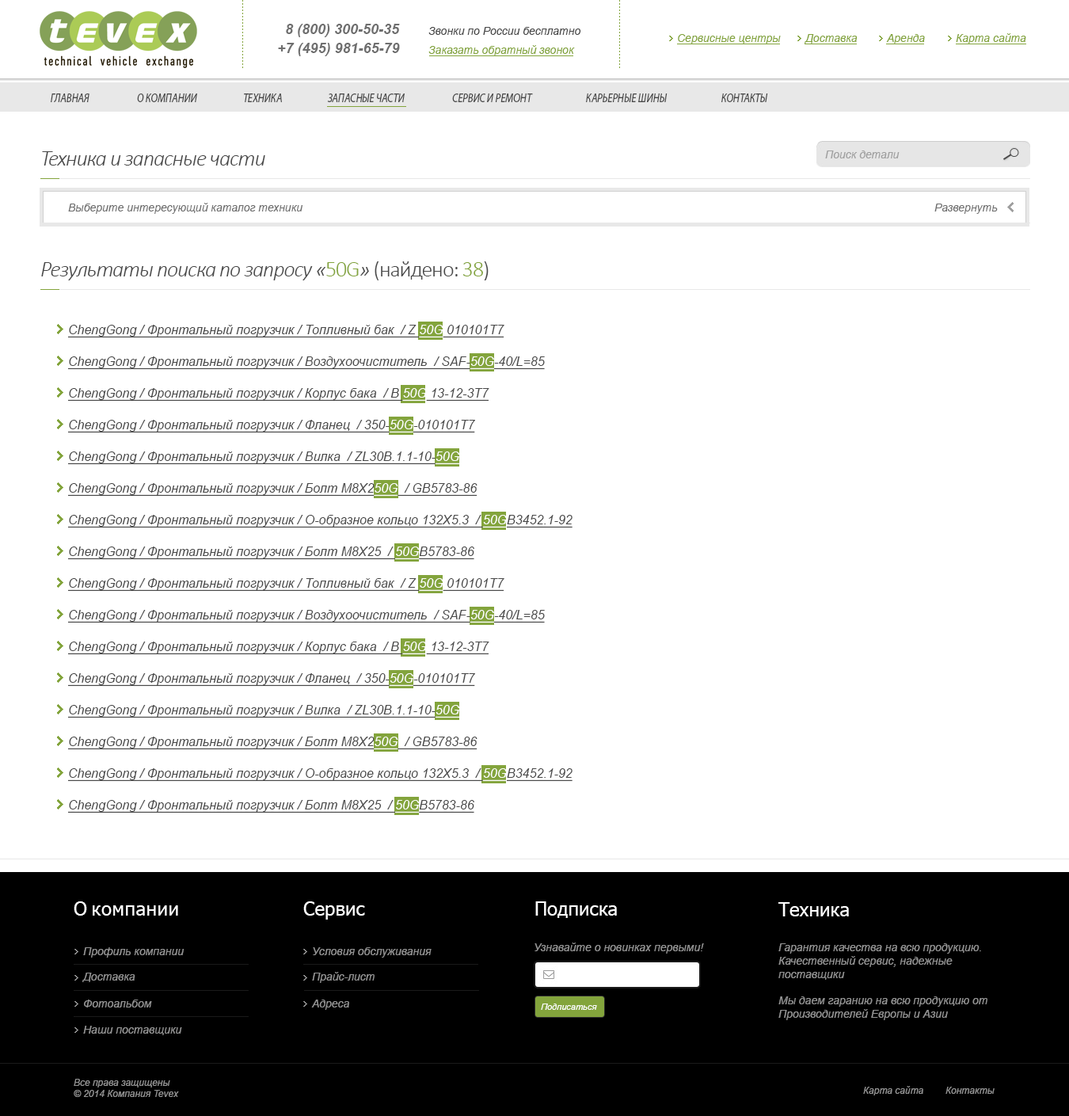
<style>
.page{position:relative;width:1069px;height:1116px;background:#ffffff}
.page>*{position:absolute;margin:0}
.t1{font:14.3px "Arial-BoldItalicMT";color:#6f6f6f}
.t2{font:11.1px "Arial-ItalicMT";color:#484848}
.t3{font:11.1px "Arial-ItalicMT";color:#83a43c}
.t4{font:12.9px "MyriadPro-It";color:#484848;scale:0.79 1}
.t5{font:22.2px "Calibri-LightItalic";letter-spacing:-0.04em;color:#484848}
.t6{font:11.1px "Arial-ItalicMT";color:#a0a0a0}
.t7{font:11.1px "Arial-ItalicMT";color:#6f6f6f}
.t8{font:22.2px "Calibri-Light";letter-spacing:-0.04em;color:#83a43c}
.t9{font:22.2px "Calibri-Light";letter-spacing:-0.04em;color:#484848}
.t10{font:12.7px "Arial-ItalicMT";color:#484848;text-decoration:underline}
.t11{font:12.7px "Arial-ItalicMT";color:#ffffff;text-decoration:underline}
.t12{font:19px "Tahoma";letter-spacing:0.02em;color:#ffffff}
.t13{font:19px "Tahoma";color:#ffffff}
.t14{font:11.1px "Arial-ItalicMT";color:#939393}
.t15{font:8.7px "Arial-ItalicMT";color:#ffffff}
.t16{font:9.5px "Arial-ItalicMT";color:#939393}
</style>
<div class="page">
<p class="t1" style="left:286px;top:24px;width:114px;height:13px">8 (800) 300-50-35</p>
<p class="t2" style="left:428px;top:27px;width:153px;height:8px">Звонки по России бесплатно</p>
<p class="t3" style="left:678px;top:34px;width:103px;height:10px">Сервисные центры</p>
<p class="t3" style="left:804px;top:34px;width:53px;height:10px">Доставка</p>
<p class="t3" style="left:886px;top:34px;width:39px;height:10px">Аренда</p>
<p class="t3" style="left:956px;top:33px;width:70px;height:11px">Карта сайта</p>
<p class="t1" style="left:278px;top:43px;width:122px;height:13px">+7 (495) 981-65-79</p>
<p class="t3" style="left:428px;top:45px;width:147px;height:11px">Заказать обратный звонок</p>
<p class="t4" style="left:51px;top:93px;width:38px;height:9px">ГЛАВНАЯ</p>
<p class="t4" style="left:137px;top:93px;width:60px;height:9px">О КОМПАНИИ</p>
<p class="t4" style="left:244px;top:93px;width:38px;height:9px">ТЕХНИКА</p>
<p class="t4" style="left:327px;top:93px;width:78px;height:9px">ЗАПАСНЫЕ ЧАСТИ</p>
<p class="t4" style="left:452px;top:93px;width:81px;height:9px">СЕРВИС И РЕМОНТ</p>
<p class="t4" style="left:586px;top:93px;width:81px;height:9px">КАРЬЕРНЫЕ ШИНЫ</p>
<p class="t4" style="left:721px;top:93px;width:47px;height:9px">КОНТАКТЫ</p>
<p class="t5" style="left:42px;top:151px;width:223px;height:14px">Техника и запасные части</p>
<p class="t6" style="left:825px;top:150px;width:74px;height:8px">Поиск детали</p>
<p class="t7" style="left:68px;top:203px;width:235px;height:11px">Выберите интересующий каталог техники</p>
<p class="t7" style="left:934px;top:203px;width:64px;height:11px">Развернуть</p>
<p class="t5" style="left:41px;top:261px;width:448px;height:19px">Результаты поиска по запросу «<span class="t8">50G</span>» <span class="t9">(найдено: </span><span class="t8">38</span><span class="t9">)</span></p>
<p class="t10" style="left:68px;top:325px;width:436px;height:13px">ChengGong / Фронтальный погрузчик / Топливный бак  / Z <span class="t11">50G</span> 010101T7</p>
<p class="t10" style="left:68px;top:356px;width:477px;height:14px">ChengGong / Фронтальный погрузчик / Воздухоочиститель  / SAF-<span class="t11">50G</span>-40/L=85</p>
<p class="t10" style="left:68px;top:388px;width:421px;height:13px">ChengGong / Фронтальный погрузчик / Корпус бака  / B <span class="t11">50G</span> 13-12-3T7</p>
<p class="t10" style="left:68px;top:420px;width:407px;height:13px">ChengGong / Фронтальный погрузчик / Фланец  / 350-<span class="t11">50G</span>-010101T7</p>
<p class="t10" style="left:68px;top:451px;width:392px;height:14px">ChengGong / Фронтальный погрузчик / Вилка  / ZL30B.1.1-10-<span class="t11">50G</span></p>
<p class="t10" style="left:68px;top:483px;width:409px;height:13px">ChengGong / Фронтальный погрузчик / Болт М8Х2<span class="t11">50G</span>  / GB5783-86</p>
<p class="t10" style="left:68px;top:515px;width:504px;height:13px">ChengGong / Фронтальный погрузчик / О-образное кольцо 132Х5.3  / <span class="t11">50G</span>B3452.1-92</p>
<p class="t10" style="left:68px;top:546px;width:406px;height:14px">ChengGong / Фронтальный погрузчик / Болт М8Х25  / <span class="t11">50G</span>B5783-86</p>
<p class="t10" style="left:68px;top:578px;width:436px;height:13px">ChengGong / Фронтальный погрузчик / Топливный бак  / Z <span class="t11">50G</span> 010101T7</p>
<p class="t10" style="left:68px;top:610px;width:477px;height:13px">ChengGong / Фронтальный погрузчик / Воздухоочиститель  / SAF-<span class="t11">50G</span>-40/L=85</p>
<p class="t10" style="left:68px;top:641px;width:421px;height:14px">ChengGong / Фронтальный погрузчик / Корпус бака  / B <span class="t11">50G</span> 13-12-3T7</p>
<p class="t10" style="left:68px;top:673px;width:407px;height:13px">ChengGong / Фронтальный погрузчик / Фланец  / 350-<span class="t11">50G</span>-010101T7</p>
<p class="t10" style="left:68px;top:705px;width:392px;height:13px">ChengGong / Фронтальный погрузчик / Вилка  / ZL30B.1.1-10-<span class="t11">50G</span></p>
<p class="t10" style="left:68px;top:736px;width:409px;height:14px">ChengGong / Фронтальный погрузчик / Болт М8Х2<span class="t11">50G</span>  / GB5783-86</p>
<p class="t10" style="left:68px;top:768px;width:504px;height:13px">ChengGong / Фронтальный погрузчик / О-образное кольцо 132Х5.3  / <span class="t11">50G</span>B3452.1-92</p>
<p class="t10" style="left:68px;top:800px;width:406px;height:13px">ChengGong / Фронтальный погрузчик / Болт М8Х25  / <span class="t11">50G</span>B5783-86</p>
<p class="t12" style="left:74px;top:901px;width:104px;height:14px"><span class="t13">О </span>компании</p>
<p class="t13" style="left:303px;top:901px;width:62px;height:18px">Сервис</p>
<p class="t13" style="left:535px;top:901px;width:82px;height:17px">Подписка</p>
<p class="t13" style="left:778px;top:902px;width:71px;height:14px">Техника</p>
<p class="t14" style="left:83px;top:947px;width:101px;height:10px">Профиль компании</p>
<p class="t14" style="left:313px;top:947px;width:119px;height:10px">Условия обслуживания</p>
<p class="t14" style="left:534px;top:942px;width:170px;height:11px">Узнавайте о новинках первыми!</p>
<p class="t14" style="left:778px;top:943px;width:209px;height:77px">Гарантия качества на всю продукцию.<br>Качественный сервис, надежные <br>поставщики<br><br>Мы даем гаранию на всю продукцию от <br>Производителей Европы и Азии</p>
<p class="t14" style="left:82px;top:972px;width:53px;height:10px">Доставка</p>
<p class="t14" style="left:312px;top:971px;width:63px;height:12px">Прайс-лист</p>
<p class="t14" style="left:84px;top:999px;width:68px;height:8px">Фотоальбом</p>
<p class="t14" style="left:311px;top:999px;width:38px;height:10px">Адреса</p>
<p class="t15" style="left:541px;top:1003px;width:56px;height:6px">Подписаться</p>
<p class="t14" style="left:83px;top:1025px;width:99px;height:10px">Наши поставщики</p>
<p class="t16" style="left:74px;top:1078px;width:105px;height:19px">Все права защищены<br>© 2014 Компания Tevex</p>
<p class="t16" style="left:863px;top:1086px;width:60px;height:9px">Карта сайта</p>
<p class="t16" style="left:945px;top:1086px;width:49px;height:7px">Контакты</p>
</div>
